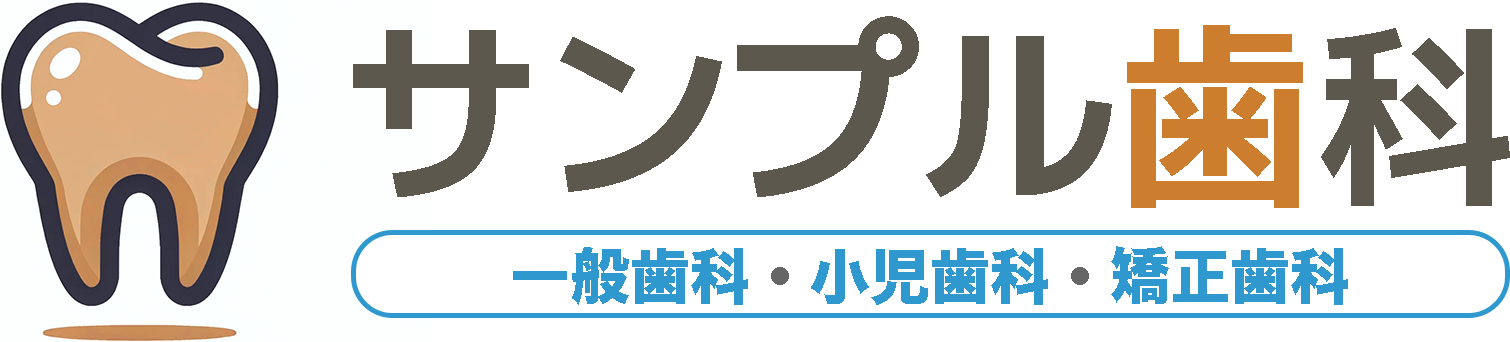
<style>
.page{position:relative;width:1510px;height:342px;background:#ffffff}
.page>*{position:absolute;margin:0}
.t1{font:202.4px "mplus-1c-bold";letter-spacing:-0.025em;color:#5d584e}
.t2{font:196.1px "mplus-1c-bold";letter-spacing:-0.025em;color:#cc7d2e}
.t3{font:196.1px "mplus-1c-bold";letter-spacing:-0.025em;color:#5d584e}
.t4{font:60px "HiraKakuStdN-W8";color:#2f98ce}
.t5{font:60px "HiraKakuStdN-W8";color:#666666}
</style>
<div class="page">
<p class="t1" style="left:353px;top:16px;width:1157px;height:192px">サンプル<span class="t2">歯</span><span class="t3">科</span></p>
<p class="t4" style="left:513px;top:246px;width:835px;height:59px">一般歯科<span class="t5">・</span>小児歯科<span class="t5">・</span>矯正歯科</p>
</div>
